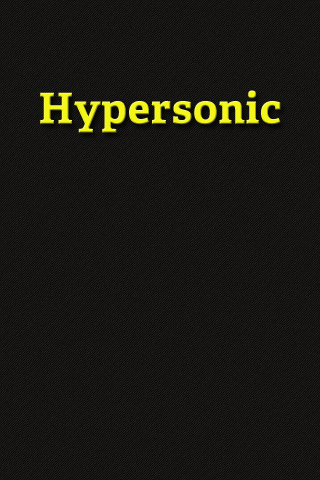
<style>
.page{position:relative;width:320px;height:480px}
.page>*{position:absolute;margin:0}
.t1{font:42.2px "AdelleBasic-Bold";letter-spacing:0.02em;color:#f3f617}
</style>
<div class="page">
<p class="t1" style="left:40px;top:90px;width:241px;height:43px">Hypersonic</p>
</div>
